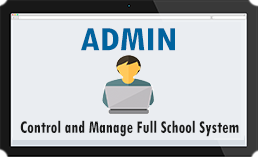
<style>
.page{position:relative;width:258px;height:157px;background:#eaedf1}
.page>*{position:absolute;margin:0}
.t1{font:36px "TwCenMT-CondensedBold";color:#00639e;scale:1.09 1}
.t2{font:18.3px "TwCenMT-CondensedBold";color:#181818;scale:0.88 1}
</style>
<div class="page">
<p class="t1" style="left:81px;top:28px;width:94px;height:23px">ADMIN</p>
<p class="t2" style="left:20px;top:120px;width:219px;height:17px">Control and Manage Full School System</p>
</div>
